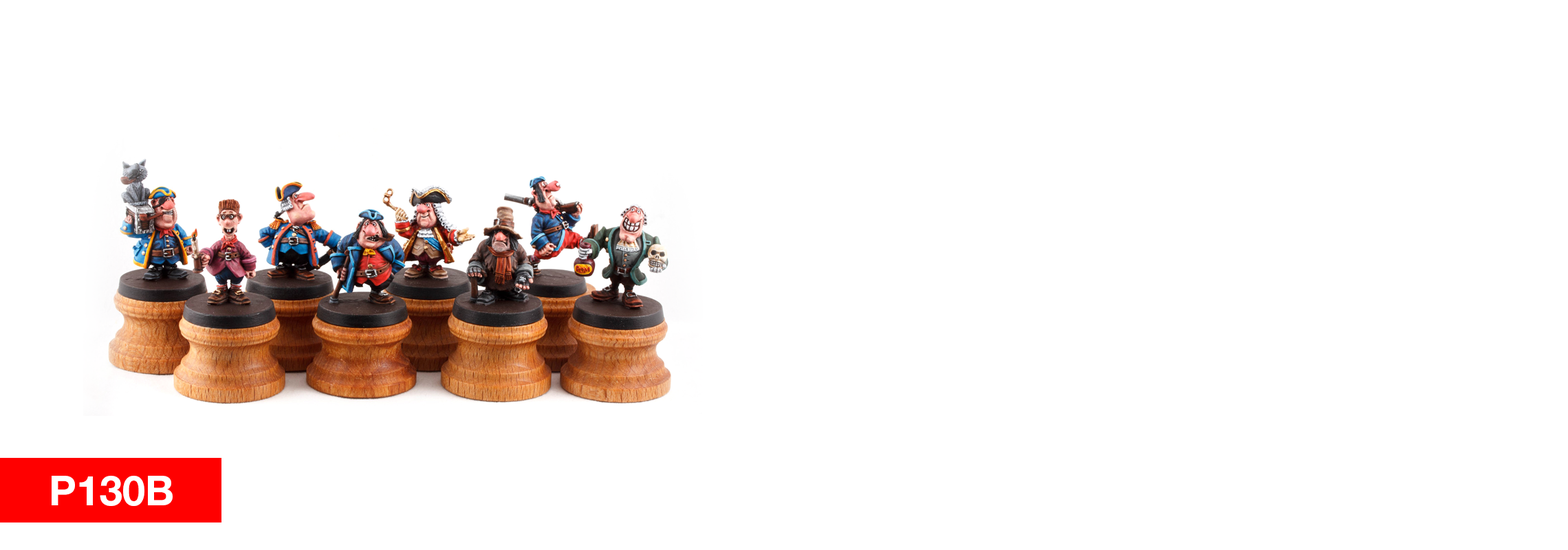
<style>
.page{position:relative;width:1568px;height:550px;background:#ffffff}
.page>*{position:absolute;margin:0}
.t1{font:41.3px "HelveticaNeueCyr-Bold";color:#ffffff}
</style>
<div class="page">
<p class="t1" style="left:52px;top:476px;width:121px;height:30px">P130B</p>
</div>
